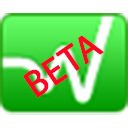
<style>
.page{position:relative;width:128px;height:128px;background:#ffffff}
.page>*{position:absolute;margin:0}
.t1{font:37.3px "MyriadPro-Regular";letter-spacing:0.017em;color:#fb0623;font-weight:bold}
</style>
<div class="page">
<p class="t1" style="left:23px;top:35px;width:81px;height:63px;rotate:-34deg">BETA</p>
</div>
